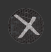
<style>
.page{position:relative;width:51px;height:52px;background:#333333}
.page>*{position:absolute;margin:0}
.t1{font:60px "JennaSue";color:#aca7a9;scale:2 1}
</style>
<div class="page">
<p class="t1" style="left:14px;top:14px;width:26px;height:24px">x</p>
<p class="t1" style="left:14px;top:14px;width:26px;height:24px">x</p>
</div>
